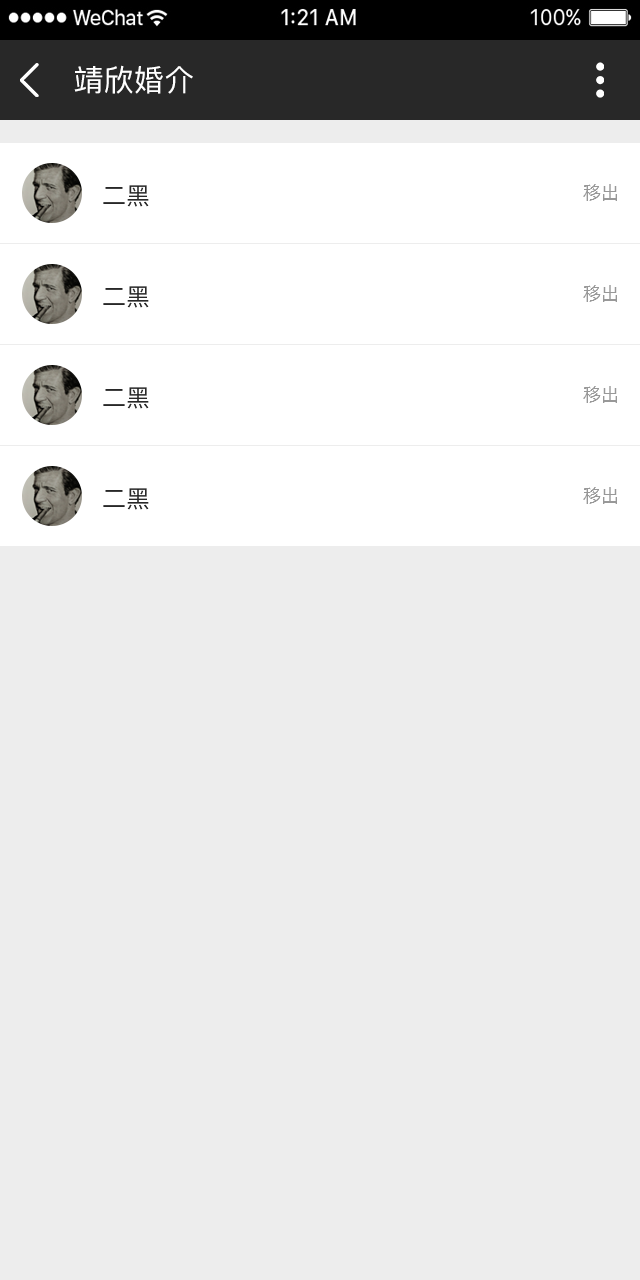
<style>
.page{position:relative;width:640px;height:1280px;background:#ededed}
.page>*{position:absolute;margin:0}
.t1{font:30px "PingFang-SC-Medium";letter-spacing:0.01em;color:#ffffff;text-transform:uppercase}
.t2{font:24px "PingFang-SC-Medium";color:#282828;text-transform:uppercase}
.t3{font:18px "PingFang-SC-Medium";color:#989898;text-transform:uppercase}
</style>
<div class="page">
<p class="t1" style="left:74px;top:65px;width:119px;height:29px">靖欣婚介</p>
<p class="t2" style="left:103px;top:185px;width:46px;height:22px">二黑</p>
<p class="t3" style="left:583px;top:184px;width:34px;height:17px">移出</p>
<p class="t2" style="left:103px;top:286px;width:46px;height:22px">二黑</p>
<p class="t3" style="left:583px;top:285px;width:34px;height:17px">移出</p>
<p class="t2" style="left:103px;top:387px;width:46px;height:22px">二黑</p>
<p class="t3" style="left:583px;top:386px;width:34px;height:17px">移出</p>
<p class="t2" style="left:103px;top:488px;width:46px;height:22px">二黑</p>
<p class="t3" style="left:583px;top:487px;width:34px;height:17px">移出</p>
</div>
